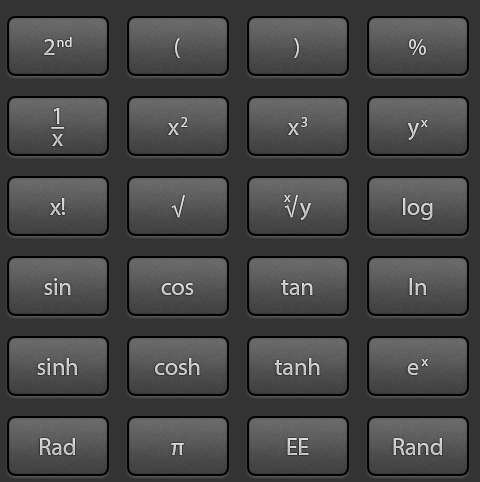
<style>
.page{position:relative;width:480px;height:482px;background:#333333}
.page>*{position:absolute;margin:0}
.t1{font:24px "MyriadPro-Regular";color:#d7d7d8}
.t2{font:24px "MyriadPro-Regular";letter-spacing:0.06em;color:#d7d7d8}
.t3{font:24px "MyriadPro-Regular";color:#d3d4d6}
.t4{font:24px "MyriadPro-Regular";color:#d4d5d6}
.t5{font:24px "MyriadPro-Regular";color:#dcddde}
.t6{font:24px/10px "MyriadPro-Regular";color:#d7d7d8}
.t7{font:24px/12px "MyriadPro-Regular";color:#d7d7d8}
.t8{font:24px "MyriadPro-Regular";letter-spacing:0.1em;color:#cfd0d1}
.t9{font:24px "MyriadPro-Regular";color:#cfd0d1}
.t10{font:24px "MyriadPro-Regular";letter-spacing:0.1em;color:#cdced0}
.t11{font:24px "MyriadPro-Regular";color:#cdced0}
.t12{font:24px "MyriadPro-Regular";letter-spacing:0.1em;color:#d1d2d3}
.t13{font:24px "MyriadPro-Regular";color:#d1d2d3}
.t14{font:24px "MyriadPro-Regular";color:#d2d3d5}
.t15{font:24px "MyriadPro-Regular";color:#dadcdd}
.t16{font:24px "MyriadPro-Regular";letter-spacing:-0.46em;color:#d2d4d5}
.t17{font:24px "MyriadPro-Regular";letter-spacing:0.1em;color:#d2d4d5}
.t18{font:24px "MyriadPro-Regular";color:#d2d4d5}
.t19{font:24px "MyriadPro-Regular";color:#cecfd1}
.t20{font:24px "MyriadPro-Regular";color:#cacbce}
.t21{font:24px "MyriadPro-Regular";color:#cbcdcf}
.t22{font:24px "MyriadPro-Regular";color:#cdced1}
.t23{font:24px "MyriadPro-Regular";color:#cccdcf}
.t24{font:24px "MyriadPro-Regular";letter-spacing:0.1em;color:#d1d2d4}
.t25{font:24px "MyriadPro-Regular";color:#d1d2d4}
.t26{font:24px "MyriadPro-Regular";color:#cccdd0}
.t27{font:24px "MyriadPro-Regular";color:#d0d1d3}
.t28{font:24px "MyriadPro-Regular";color:#cbcccf}
.t29{font:24px "MyriadPro-Regular";color:#cfd0d2}
</style>
<div class="page">
<p class="t1" style="left:44px;top:37px;width:28px;height:18px"><span class="t2">2</span>nd</p>
<p class="t3" style="left:175px;top:38px;width:5px;height:20px">(</p>
<p class="t4" style="left:294px;top:38px;width:5px;height:20px">)</p>
<p class="t5" style="left:409px;top:39px;width:17px;height:16px">%</p>
<p class="t1" style="left:51px;top:108px;width:13px;height:38px;text-align:center">1<br><span class="t6">−<br></span><span class="t7">x</span></p>
<p class="t8" style="left:168px;top:117px;width:20px;height:18px">x<span class="t9">2</span></p>
<p class="t10" style="left:288px;top:117px;width:19px;height:18px">x<span class="t11">3</span></p>
<p class="t12" style="left:408px;top:120px;width:20px;height:20px">y<span class="t13">x</span></p>
<p class="t14" style="left:50px;top:198px;width:15px;height:17px">x!</p>
<p class="t15" style="left:171px;top:195px;width:14px;height:23px">√</p>
<p class="t16" style="left:284px;top:195px;width:27px;height:25px">x<span class="t17">√</span><span class="t18">y</span></p>
<p class="t19" style="left:403px;top:198px;width:30px;height:22px">log</p>
<p class="t20" style="left:44px;top:278px;width:27px;height:17px">sin</p>
<p class="t21" style="left:281px;top:279px;width:32px;height:16px">tan</p>
<p class="t20" style="left:409px;top:278px;width:17px;height:17px">ln</p>
<p class="t22" style="left:161px;top:283px;width:33px;height:12px">cos</p>
<p class="t20" style="left:37px;top:358px;width:40px;height:17px">sinh</p>
<p class="t23" style="left:155px;top:358px;width:45px;height:17px">cosh</p>
<p class="t20" style="left:274px;top:358px;width:46px;height:17px">tanh</p>
<p class="t24" style="left:407px;top:359px;width:21px;height:16px">e<span class="t25">x</span></p>
<p class="t26" style="left:40px;top:438px;width:35px;height:17px">Rad</p>
<p class="t27" style="left:287px;top:438px;width:22px;height:17px">EE</p>
<p class="t28" style="left:393px;top:438px;width:49px;height:17px">Rand</p>
<p class="t29" style="left:171px;top:443px;width:13px;height:12px">π</p>
</div>
